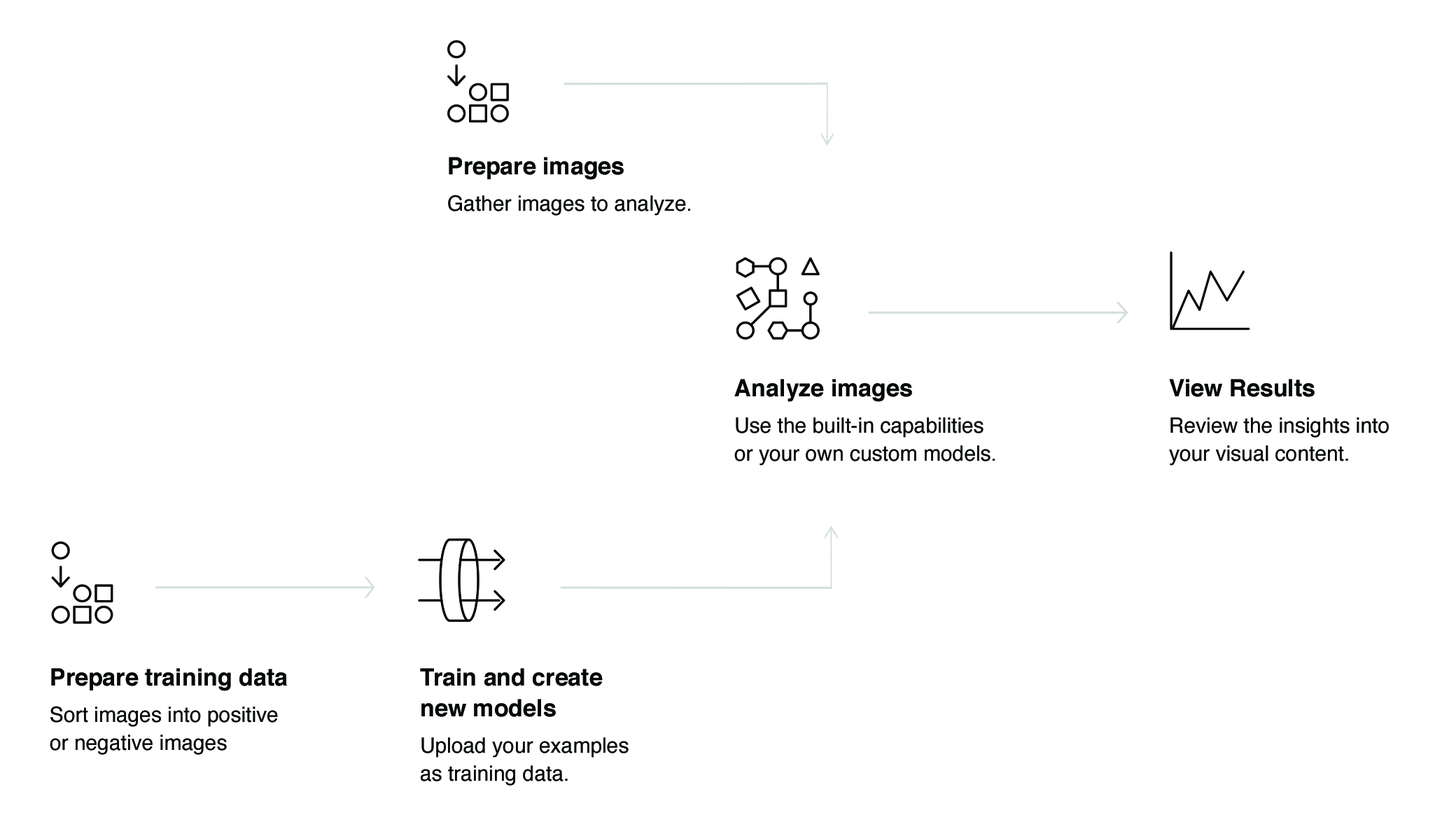
<style>
.page{position:relative;width:1442px;height:827px;background:#ffffff}
.page>*{position:absolute;margin:0}
.t1{font:21px/36.4px "Helvetica";color:#060808}
.t2{font:23.8px/30.5px "Helvetica-Bold";color:#060808}
.t3{font:21px/28px "Helvetica";color:#060808}
</style>
<div class="page">
<p class="t1" style="left:448px;top:157px;width:242px;height:59px"><span class="t2">Prepare images<br></span>Gather images to analyze.</p>
<p class="t3" style="left:734px;top:379px;width:261px;height:87px"><span class="t2">Analyze images<br></span><span class="t1">Use the built-in </span>capabilities <br>or your own custom models.</p>
<p class="t3" style="left:1169px;top:379px;width:220px;height:87px"><span class="t2">View Results<br></span><span class="t1">Review the insi</span>ghts into <br>your visual content.</p>
<p class="t3" style="left:50px;top:668px;width:237px;height:87px"><span class="t2">Prepare training data<br></span><span class="t1">Sort images </span>into positive <br>or negative images</p>
<p class="t3" style="left:420px;top:668px;width:209px;height:118px"><span class="t2">Train and create <br>new models<br></span><span class="t1">Upload you</span>r examples <br>as training data.</p>
</div>
